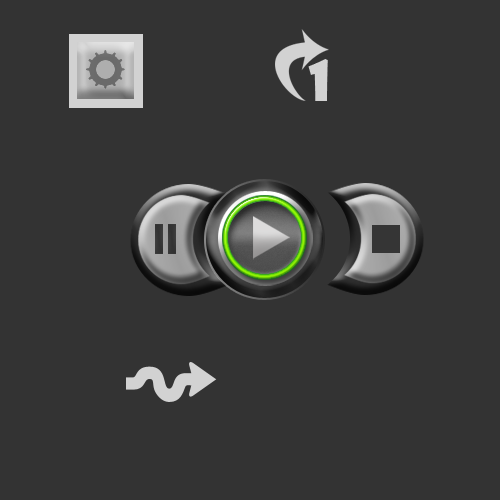
<style>
.page{position:relative;width:500px;height:500px;background:#333333}
.page>*{position:absolute;margin:0}
.t1{font:53.8px "ShowcardGothic-Reg";color:#d2d2d2}
</style>
<div class="page">
<p class="t1" style="left:308px;top:59px;width:20px;height:42px">1</p>
</div>
